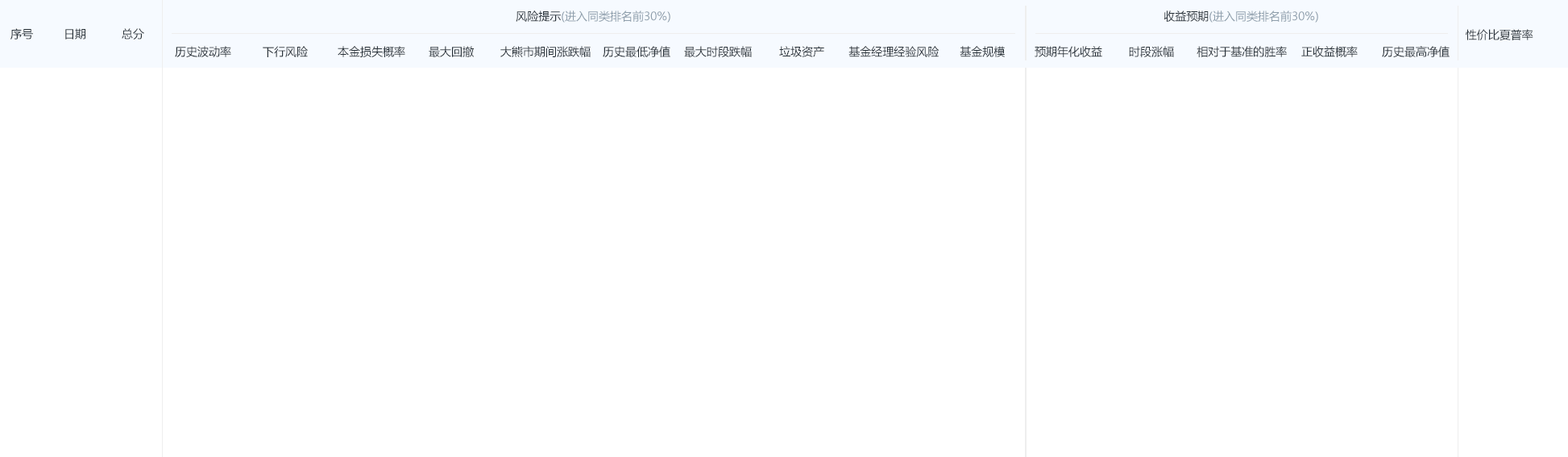
<style>
.page{position:relative;width:1568px;height:457px;background:#ffffff}
.page>*{position:absolute;margin:0}
.t1{font:11.3px "MicrosoftYaHei";color:#8e9eab}
.t2{font:11.3px "MicrosoftYaHei";color:#273037}
</style>
<div class="page">
<p class="t1" style="left:516px;top:10px;width:154px;height:13px"><span class="t2">风险提示</span>(进入同类排名前30%)</p>
<p class="t1" style="left:1164px;top:10px;width:154px;height:13px"><span class="t2">收益预期</span>(进入同类排名前30%)</p>
<p class="t2" style="left:10px;top:28px;width:23px;height:11px">序号</p>
<p class="t2" style="left:65px;top:28px;width:20px;height:11px">日期</p>
<p class="t2" style="left:122px;top:28px;width:22px;height:11px">总分</p>
<p class="t2" style="left:1466px;top:29px;width:67px;height:11px">性价比夏普率</p>
<p class="t2" style="left:175px;top:46px;width:56px;height:11px">历史波动率</p>
<p class="t2" style="left:263px;top:46px;width:45px;height:11px">下行风险</p>
<p class="t2" style="left:338px;top:46px;width:67px;height:11px">本金损失概率</p>
<p class="t2" style="left:429px;top:46px;width:45px;height:11px">最大回撤</p>
<p class="t2" style="left:500px;top:46px;width:91px;height:11px">大熊市期间涨跌幅</p>
<p class="t2" style="left:603px;top:46px;width:67px;height:11px">历史最低净值</p>
<p class="t2" style="left:684px;top:46px;width:68px;height:11px">最大时段跌幅</p>
<p class="t2" style="left:779px;top:46px;width:45px;height:11px">垃圾资产</p>
<p class="t2" style="left:848px;top:46px;width:92px;height:11px">基金经理经验风险</p>
<p class="t2" style="left:960px;top:46px;width:45px;height:11px">基金规模</p>
<p class="t2" style="left:1035px;top:46px;width:67px;height:11px">预期年化收益</p>
<p class="t2" style="left:1129px;top:46px;width:45px;height:11px">时段涨幅</p>
<p class="t2" style="left:1197px;top:46px;width:90px;height:11px">相对于基准的胜率</p>
<p class="t2" style="left:1301px;top:46px;width:57px;height:11px">正收益概率</p>
<p class="t2" style="left:1382px;top:46px;width:68px;height:11px">历史最高净值</p>
</div>
